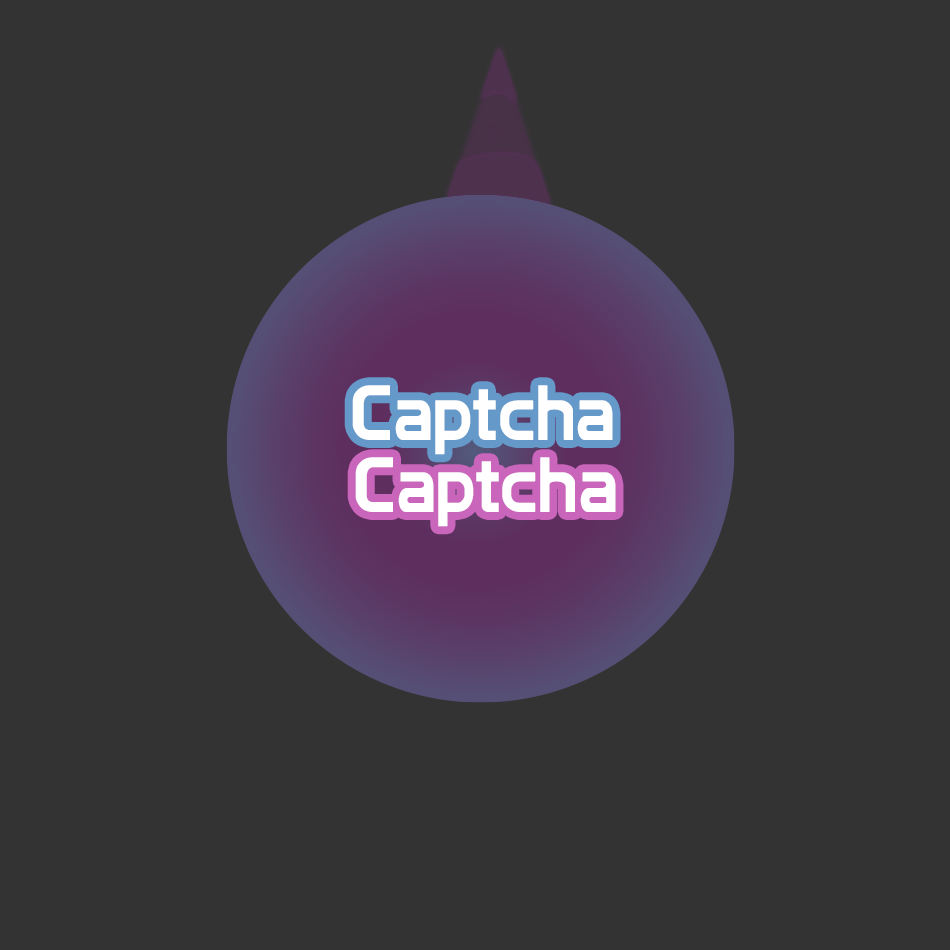
<style>
.page{position:relative;width:950px;height:950px;background:#333333}
.page>*{position:absolute;margin:0}
.t1{font:76.2px "Prototype";color:#ffffff}
.t2{font:76.3px "Prototype";color:#ffffff}
</style>
<div class="page">
<p class="t1" style="left:352px;top:385px;width:261px;height:70px">Captcha</p>
<p class="t2" style="left:355px;top:457px;width:261px;height:70px">Captcha</p>
</div>
